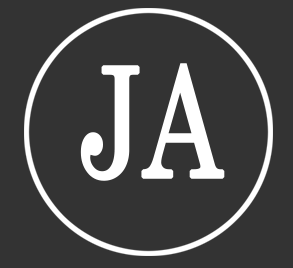
<style>
.page{position:relative;width:293px;height:268px;background:#333333}
.page>*{position:absolute;margin:0}
.t1{font:152px "Century";color:#ffffff;font-weight:bold;scale:0.71 1}
</style>
<div class="page">
<p class="t1" style="left:80px;top:63px;width:145px;height:118px">JA</p>
</div>
